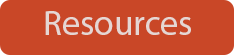
<style>
.page{position:relative;width:234px;height:55px;background:#c94727}
.page>*{position:absolute;margin:0}
.t1{font:35.6px "MyriadPro-Regular";color:#e5d7d3}
</style>
<div class="page">
<p class="t1" style="left:45px;top:11px;width:146px;height:24px">Resources</p>
</div>
